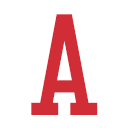
<style>
.page{position:relative;width:128px;height:128px;background:#ffffff}
.page>*{position:absolute;margin:0}
.t1{font:120px "CardCharacters";color:#d12d36}
</style>
<div class="page">
<p class="t1" style="left:31px;top:14px;width:67px;height:101px">A</p>
</div>
